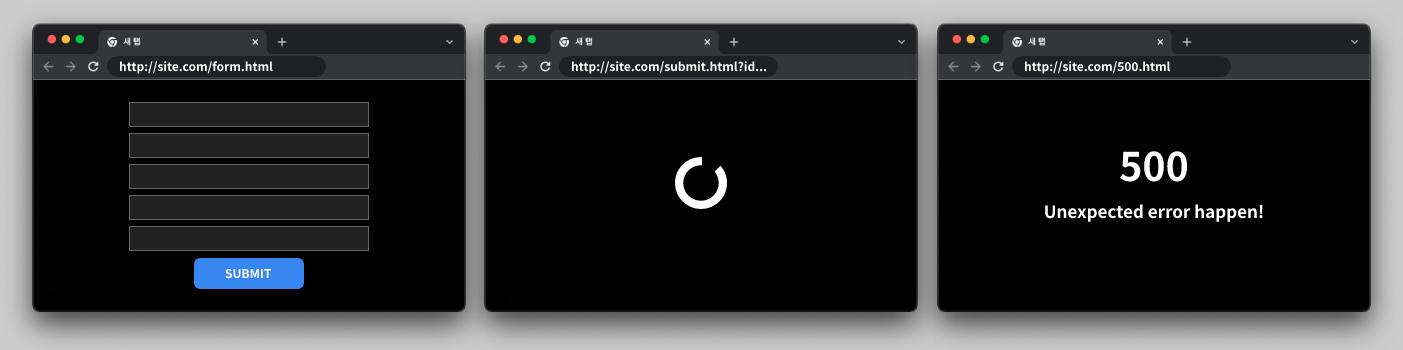
<style>
.page{position:relative;width:1403px;height:350px;background:#010101}
.page>*{position:absolute;margin:0}
.t1{font:12px "NotoSansKR-Bold";color:#ffffff}
.t2{font:39.4px "NotoSansKR-Bold";color:#ffffff}
.t3{font:17px "NotoSansKR-Bold";color:#ffffff}
</style>
<div class="page">
<p class="t1" style="left:119px;top:61px;width:154px;height:13px">http://site.com/form.html</p>
<p class="t1" style="left:571px;top:61px;width:196px;height:13px">http://site.com/submit.html?id...</p>
<p class="t1" style="left:1024px;top:61px;width:147px;height:13px">http://site.com/500.html</p>
<p class="t2" style="left:1120px;top:151px;width:67px;height:31px">500</p>
<p class="t3" style="left:1045px;top:204px;width:218px;height:18px">Unexpected error happen!</p>
<p class="t1" style="left:225px;top:268px;width:46px;height:11px">SUBMIT</p>
</div>
